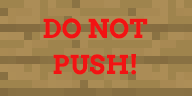
<style>
.page{position:relative;width:192px;height:96px;background:#9f844d}
.page>*{position:absolute;margin:0}
.t1{font:26px/36px "Arvo-Bold";color:#f21313;text-transform:uppercase}
</style>
<div class="page">
<p class="t1" style="left:43px;top:18px;width:105px;height:57px;text-align:center">Do not push!</p>
</div>
